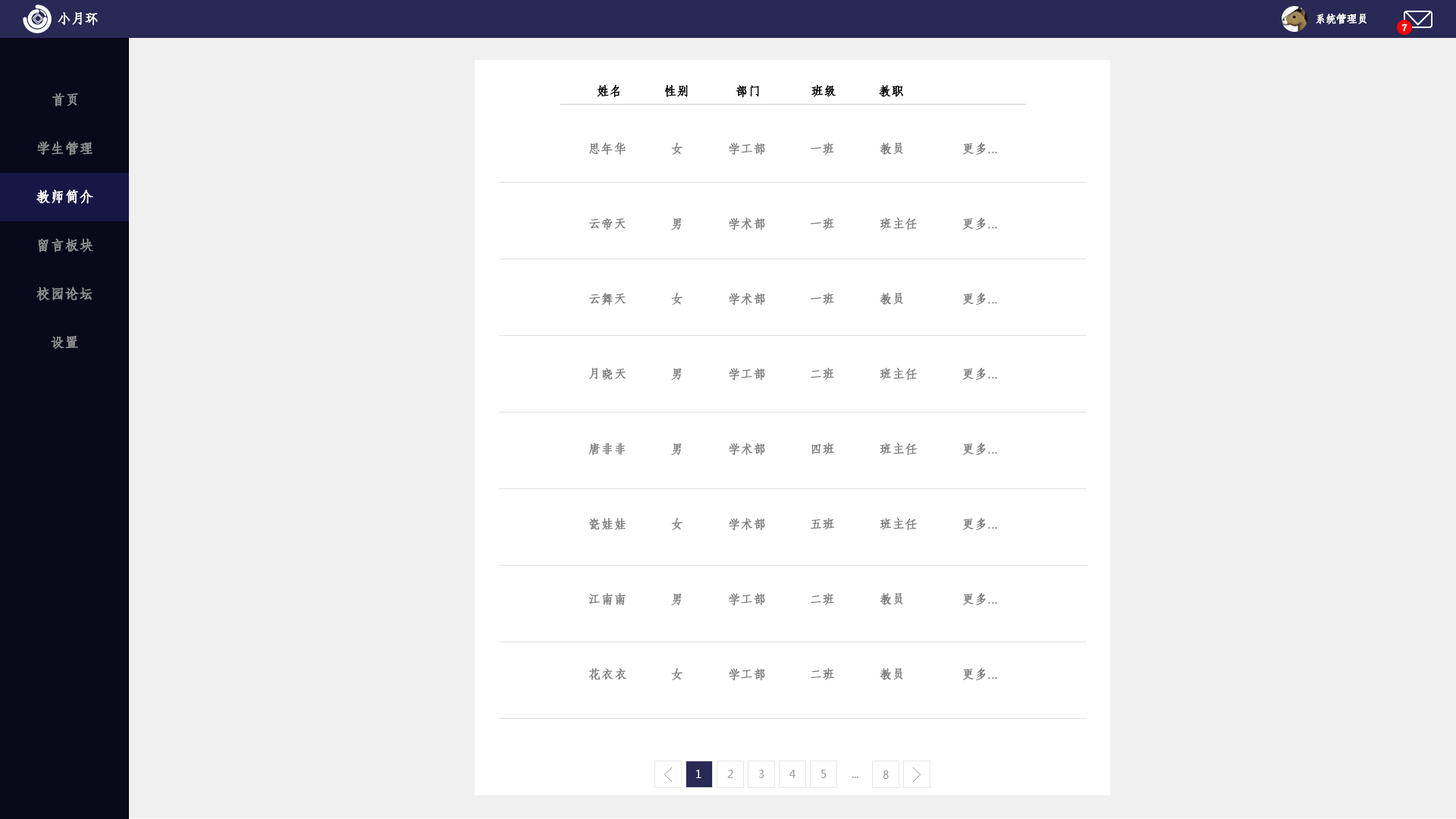
<style>
.page{position:relative;width:1456px;height:819px;background:#f0f0f0}
.page>*{position:absolute;margin:0}
.t1{font:13.4px "AdobeFangsongStd-Regular";color:#ffffff;font-weight:bold}
.t2{font:10.6px "AdobeFangsongStd-Regular";color:#ffffff;font-weight:bold}
.t3{font:9.1px "AdobeFangsongStd-Regular";color:#ffffff;font-weight:bold}
.t4{font:12.1px "AdobeFangsongStd-Regular";color:#000000;font-weight:bold}
.t5{font:13.6px "AdobeFangsongStd-Regular";color:#8f8f92;font-weight:bold}
.t6{font:12.1px/75.1px "AdobeFangsongStd-Regular";color:#7f7f7f;font-weight:bold}
.t7{font:13.6px "AdobeFangsongStd-Regular";color:#ffffff;font-weight:bold}
.t8{font:10.6px "MicrosoftYaHei";color:#ffffff;text-transform:uppercase}
.t9{font:10.6px "MicrosoftYaHei";color:#999999;text-transform:uppercase}
</style>
<div class="page">
<p class="t1" style="left:58px;top:12px;width:40px;height:14px">小月环</p>
<p class="t2" style="left:1316px;top:13px;width:50px;height:11px">系统管理员</p>
<p class="t3" style="left:1401px;top:24px;width:6px;height:7px">7</p>
<p class="t4" style="left:597px;top:85px;width:306px;height:13px">姓名          性别           部门            班级          教职</p>
<p class="t5" style="left:52px;top:93px;width:26px;height:14px">首页</p>
<p class="t5" style="left:37px;top:141px;width:56px;height:14px">学生管理</p>
<p class="t6" style="left:588px;top:142px;width:38px;height:538px">思年华<br>云帝天<br>云舞天<br>月晓天<br>唐非非<br>瓷娃娃<br>江南南<br>花衣衣</p>
<p class="t6" style="left:671px;top:143px;width:11px;height:537px">女<br>男<br>女<br>男<br>男<br>女<br>男<br>女</p>
<p class="t6" style="left:729px;top:143px;width:36px;height:538px">学工部<br>学术部<br>学术部<br>学工部<br>学术部<br>学术部<br>学工部<br>学工部</p>
<p class="t6" style="left:810px;top:143px;width:25px;height:537px">一班<br>一班<br>一班<br>二班<br>四班<br>五班<br>二班<br>二班</p>
<p class="t6" style="left:880px;top:143px;width:37px;height:537px">教员<br>班主任<br>教员<br>班主任<br>班主任<br>班主任<br>教员<br>教员</p>
<p class="t6" style="left:962px;top:143px;width:35px;height:537px">更多...<br>更多...<br>更多...<br>更多...<br>更多...<br>更多...<br>更多...<br>更多...</p>
<p class="t7" style="left:36px;top:190px;width:57px;height:14px">教师简介</p>
<p class="t5" style="left:38px;top:238px;width:55px;height:15px">留言板块</p>
<p class="t5" style="left:36px;top:287px;width:57px;height:14px">校园论坛</p>
<p class="t5" style="left:51px;top:335px;width:27px;height:14px">设置</p>
<p class="t8" style="left:696px;top:770px;width:5px;height:8px">1</p>
<p class="t9" style="left:727px;top:770px;width:6px;height:8px">2</p>
<p class="t9" style="left:759px;top:770px;width:5px;height:8px">3</p>
<p class="t9" style="left:789px;top:770px;width:6px;height:8px">4</p>
<p class="t9" style="left:821px;top:770px;width:6px;height:8px">5</p>
<p class="t9" style="left:883px;top:770px;width:6px;height:9px">8</p>
<p class="t9" style="left:852px;top:777px;width:6px;height:1px">...</p>
</div>
